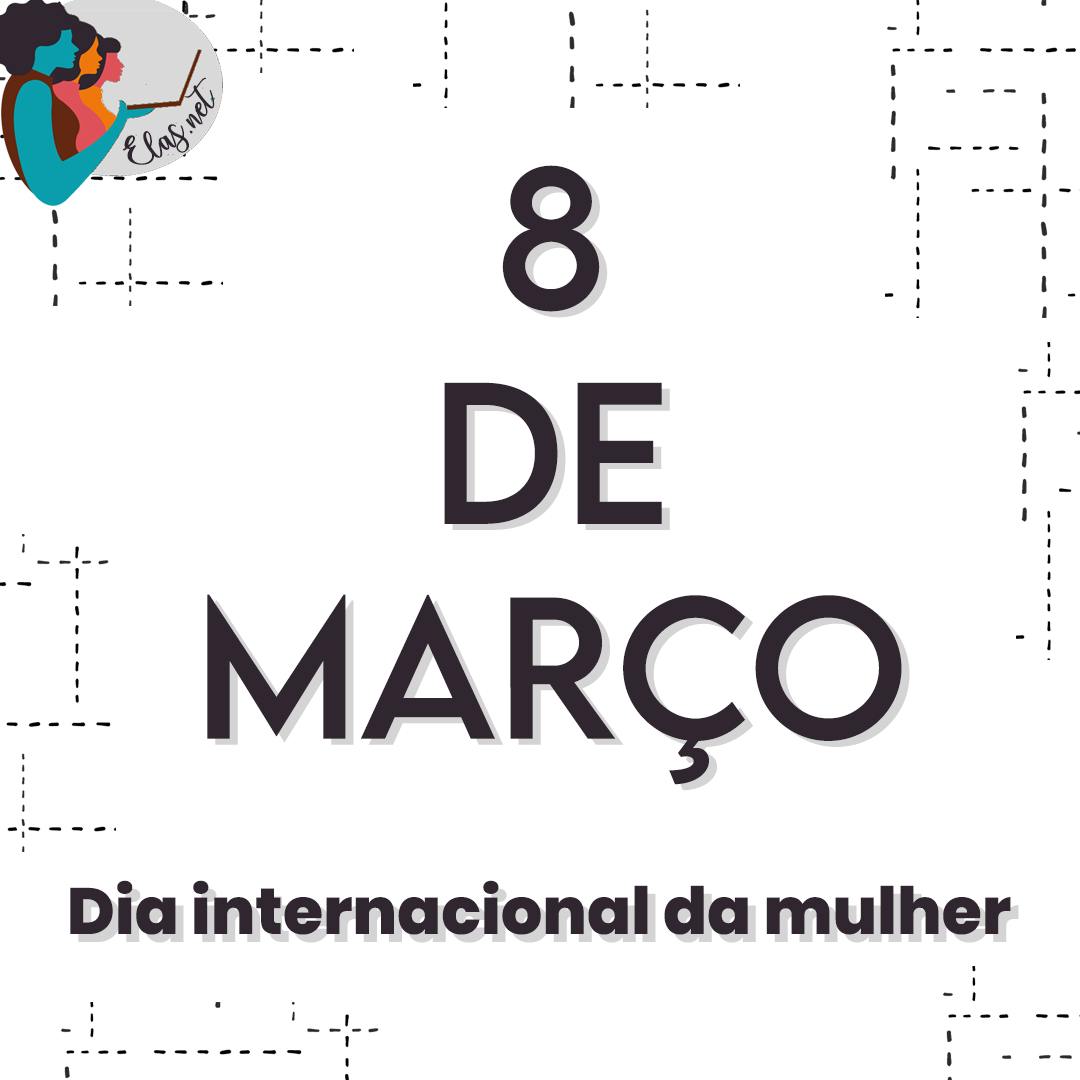
<style>
.page{position:relative;width:1080px;height:1080px;background:#ffffff}
.page>*{position:absolute;margin:0}
.t1{font:25.6px "charlinda-Regular";color:#2f262f;scale:1.18 1}
.t2{font:179px "LEMONMILK-Regular";color:#2f262f}
.t3{font:179px "LEMONMILK-Regular"}
.t4{font:65px "Poppins-ExtraBold";color:#2f262f}
</style>
<div class="page">
<p class="t1" style="left:123px;top:77px;width:92px;height:88px;rotate:-41deg">Elas.net</p>
<p class="t2" style="left:207px;top:165px;width:695px;height:620px;text-align:center">8<br>DE<br>MARÇO</p>
<p class="t3" style="left:215px;top:171px;width:695px;height:620px;text-align:center">8<br>DE<br>MARÇO</p>
<p class="t4" style="left:70px;top:880px;width:941px;height:55px">Dia internacional da mulher</p>
</div>
